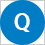
<style>
.page{position:relative;width:45px;height:45px;background:#007dc5}
.page>*{position:absolute;margin:0}
.t1{font:22px "NanumGothicExtraBold";color:#ffffff}
</style>
<div class="page">
<p class="t1" style="left:14px;top:13px;width:16px;height:19px">Q</p>
</div>
